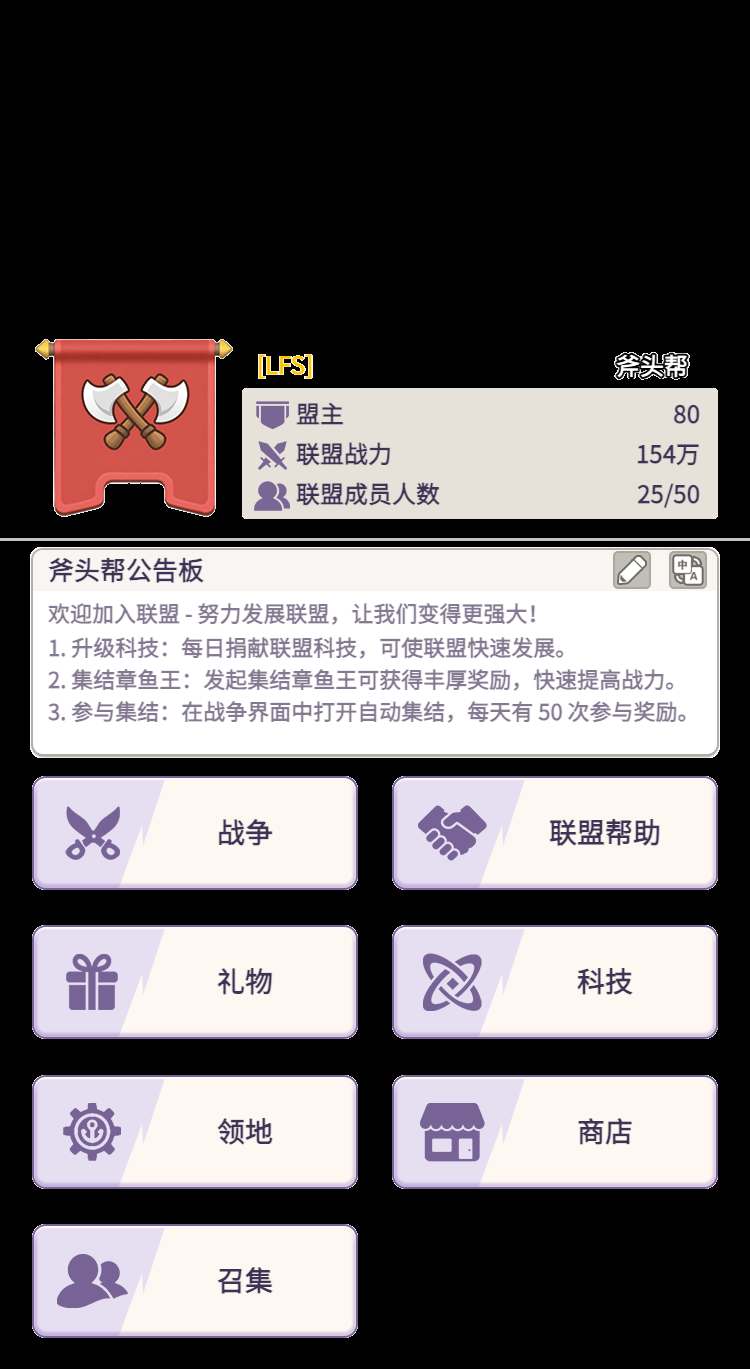
<style>
.page{position:relative;width:750px;height:1369px;background:#000000}
.page>*{position:absolute;margin:0}
.t1{font:26px "WebPSD-18463539-0-Regular";color:#3f3254;font-weight:bold}
.t2{font:22px "WebPSD-18463539-0-Regular";color:#837a91;font-weight:bold}
</style>
<div class="page">
<p class="t1" style="left:48px;top:550px;width:540px;height:41px">斧头帮公告板</p>
<p class="t2" style="left:48px;top:598px;width:654px;height:32px">欢迎加入联盟 - 努力发展联盟，让我们变得更强大！</p>
<p class="t2" style="left:48px;top:632px;width:654px;height:32px">1. 升级科技：每日捐献联盟科技，可使联盟快速发展。</p>
<p class="t2" style="left:48px;top:664px;width:654px;height:32px">2. 集结章鱼王：发起集结章鱼王可获得丰厚奖励，快速提高战力。</p>
<p class="t2" style="left:48px;top:696px;width:654px;height:32px">3. 参与集结：在战争界面中打开自动集结，每天有 50 次参与奖励。</p>
</div>
